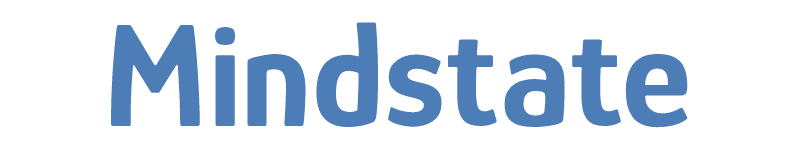
<style>
.page{position:relative;width:800px;height:150px;background:#ffffff}
.page>*{position:absolute;margin:0}
.t1{font:150px "Glory-Bold";color:#4c7db7}
</style>
<div class="page">
<p class="t1" style="left:111px;top:22px;width:577px;height:106px">Mindstate</p>
</div>
